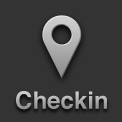
<style>
.page{position:relative;width:122px;height:122px;background:#333333}
.page>*{position:absolute;margin:0}
.t1{font:24px "Helvetica-Bold";color:#aaaaaa}
</style>
<div class="page">
<p class="t1" style="left:16px;top:91px;width:91px;height:19px">Checkin</p>
</div>
